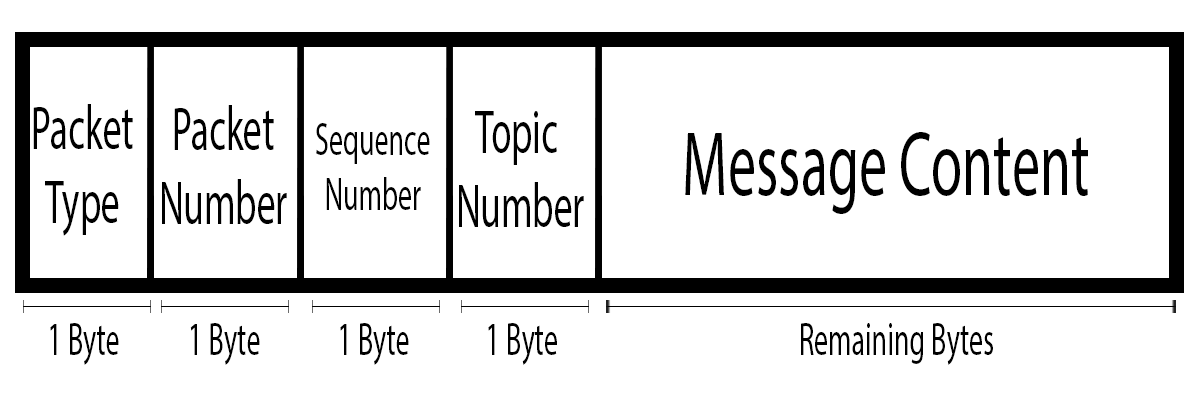
<style>
.page{position:relative;width:1200px;height:400px;background:#ffffff}
.page>*{position:absolute;margin:0}
.t1{font:61.7px "MyriadPro-Regular";color:#000000;scale:0.61 1}
.t2{font:46.3px "MyriadPro-Regular";color:#000000;scale:0.61 1}
.t3{font:92.5px "MyriadPro-Regular";color:#000000;scale:0.61 1}
</style>
<div class="page">
<p class="t1" style="left:33px;top:104px;width:100px;height:132px;text-align:center">Packet<br>Type</p>
<p class="t1" style="left:162px;top:105px;width:125px;height:119px;text-align:center">Packet<br>Number</p>
<p class="t1" style="left:459px;top:111px;width:125px;height:116px;text-align:center">Topic <br>Number</p>
<p class="t2" style="left:316px;top:123px;width:114px;height:87px;text-align:center">Sequence<br>Number</p>
<p class="t3" style="left:685px;top:132px;width:403px;height:82px">Message Content</p>
<p class="t2" style="left:50px;top:323px;width:69px;height:42px">1 Byte</p>
<p class="t2" style="left:190px;top:323px;width:70px;height:42px">1 Byte</p>
<p class="t2" style="left:340px;top:323px;width:69px;height:42px">1 Byte</p>
<p class="t2" style="left:488px;top:323px;width:69px;height:42px">1 Byte</p>
<p class="t2" style="left:801px;top:323px;width:192px;height:42px">Remaining Bytes</p>
</div>
